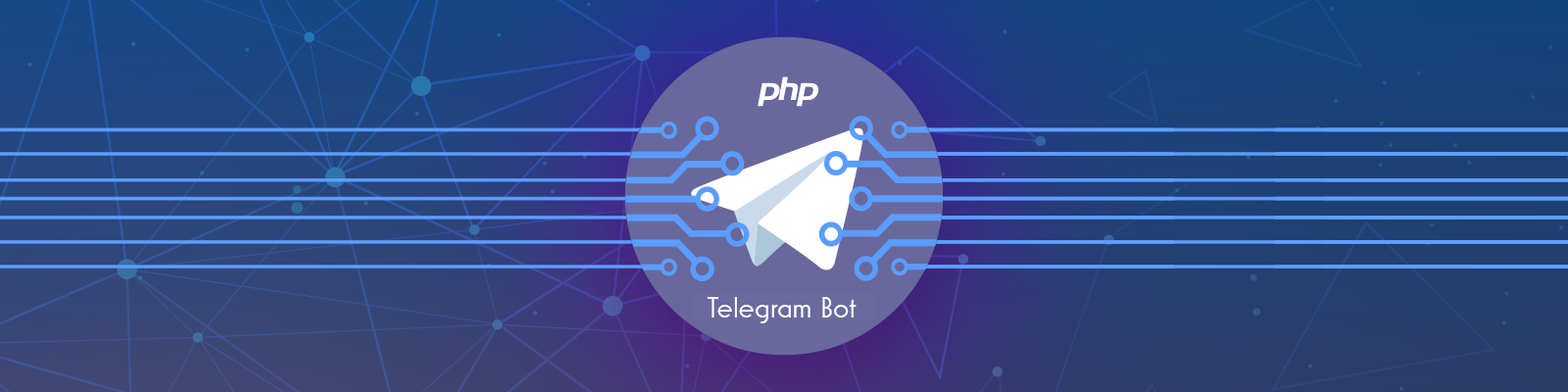
<style>
.page{position:relative;width:1568px;height:392px}
.page>*{position:absolute;margin:0}
.t1{font:29.4px "MostraNuova";color:#ffffff}
</style>
<div class="page">
<p class="t1" style="left:707px;top:297px;width:150px;height:26px">Telegram Bot</p>
</div>
